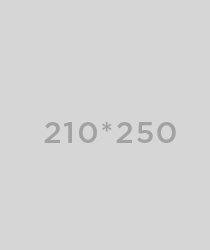
<style>
.page{position:relative;width:210px;height:250px;background:#d6d6d6}
.page>*{position:absolute;margin:0}
.t1{font:30px "Gotham-Medium";letter-spacing:0.06em;color:#a2a2a2}
</style>
<div class="page">
<p class="t1" style="left:44px;top:122px;width:132px;height:21px">210*250</p>
</div>
